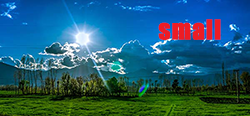
<style>
.page{position:relative;width:250px;height:116px}
.page>*{position:absolute;margin:0}
.t1{font:25.1px "Impact";letter-spacing:0.025em;color:#ed1c24;font-weight:bold}
</style>
<div class="page">
<p class="t1" style="left:158px;top:19px;width:63px;height:21px">small</p>
</div>
